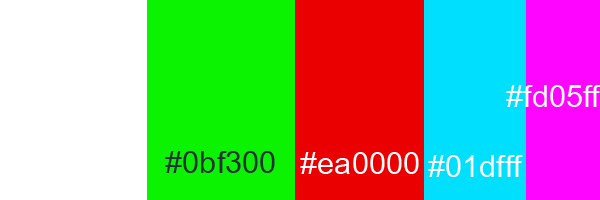
<style>
.page{position:relative;width:600px;height:200px;background:#ffffff}
.page>*{position:absolute;margin:0}
.t1{font:47px "BrowalliaUPC";color:#ffffff}
.t2{font:47px "BrowalliaUPC";color:#233237}
</style>
<div class="page">
<p class="t1" style="left:506px;top:85px;width:95px;height:22px">#fd05ff</p>
<p class="t2" style="left:165px;top:151px;width:110px;height:22px">#0bf300</p>
<p class="t1" style="left:300px;top:152px;width:119px;height:22px">#ea0000</p>
<p class="t1" style="left:428px;top:155px;width:95px;height:22px">#01dfff</p>
</div>
